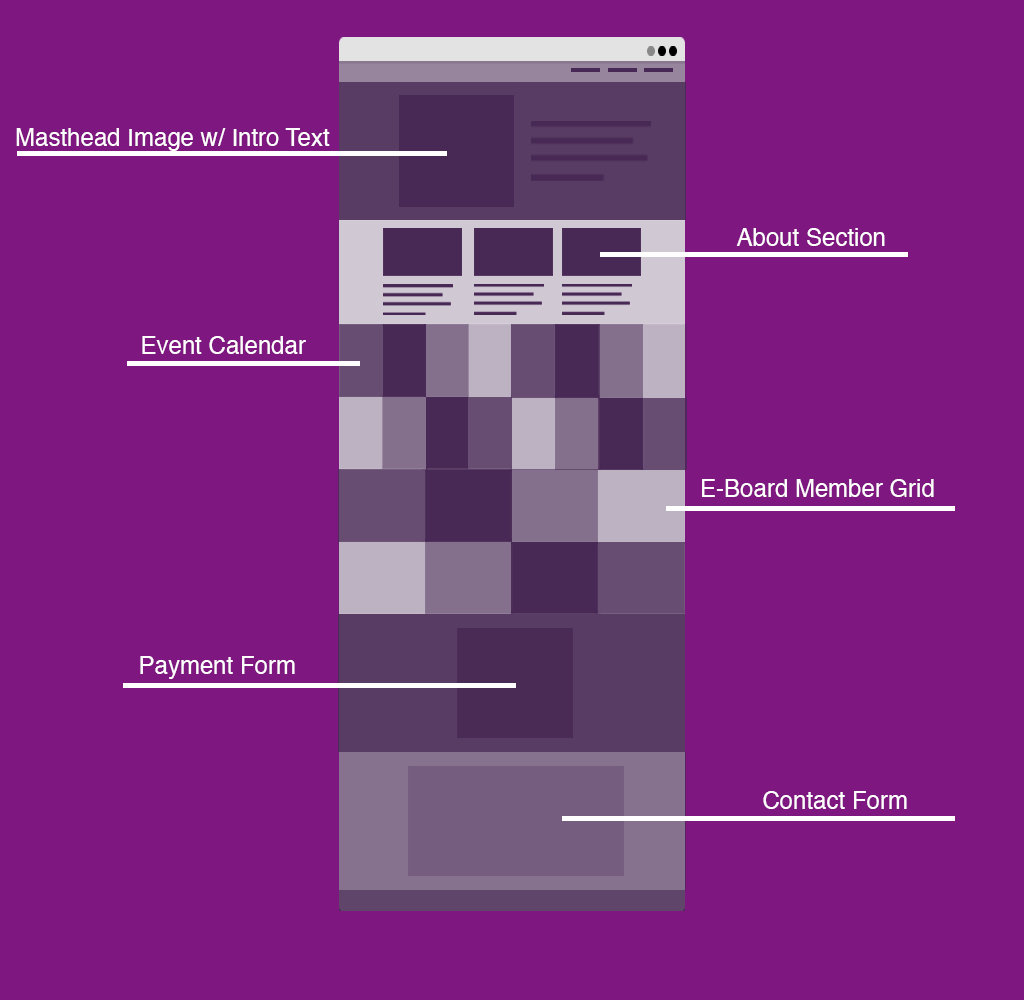
<style>
.page{position:relative;width:1024px;height:1000px;background:#7f1780}
.page>*{position:absolute;margin:0}
.t1{font:24px "Helvetica";color:#ffffff}
</style>
<div class="page">
<p class="t1" style="left:16px;top:128px;width:314px;height:23px">Masthead Image w/ Intro Text</p>
<p class="t1" style="left:736px;top:228px;width:149px;height:18px">About Section</p>
<p class="t1" style="left:142px;top:336px;width:164px;height:18px">Event Calendar</p>
<p class="t1" style="left:702px;top:479px;width:232px;height:18px">E-Board Member Grid</p>
<p class="t1" style="left:140px;top:656px;width:155px;height:23px">Payment Form</p>
<p class="t1" style="left:763px;top:791px;width:144px;height:18px">Contact Form</p>
</div>
